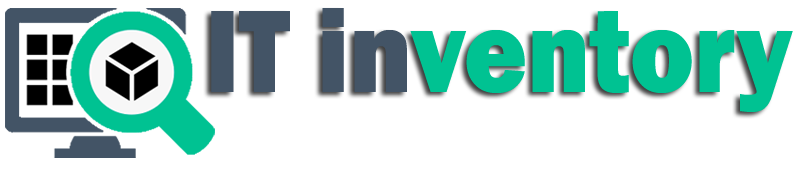
<style>
.page{position:relative;width:800px;height:173px;background:#ffffff}
.page>*{position:absolute;margin:0}
.t1{font:122px "FranklinGothic-Heavy";color:#00c292;scale:0.88 1}
.t2{font:122px "FranklinGothic-Heavy";color:#435466;scale:0.88 1}
</style>
<div class="page">
<p class="t1" style="left:211px;top:8px;width:582px;height:104px"><span class="t2">IT in</span>ventory</p>
</div>
